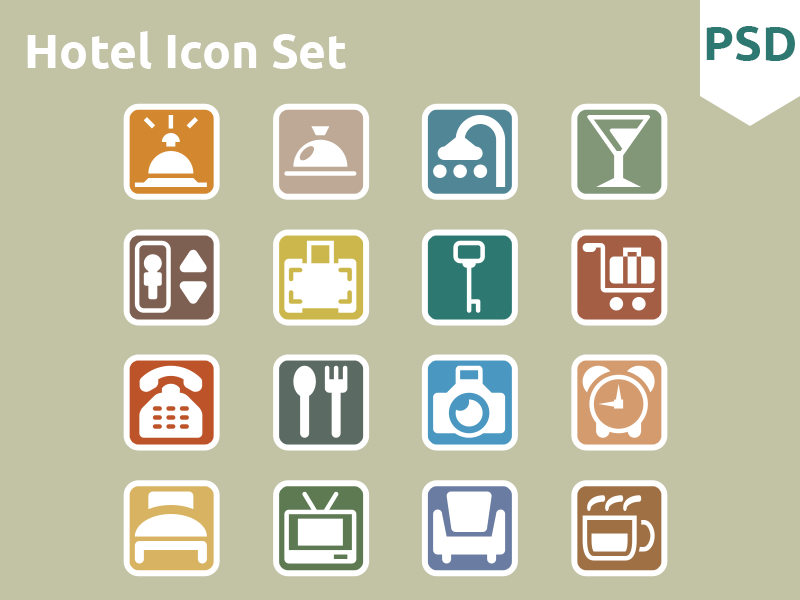
<style>
.page{position:relative;width:800px;height:600px;background:#c2c2a5}
.page>*{position:absolute;margin:0}
.t1{font:48px "Ubuntu-Bold";color:#2d7871}
.t2{font:48px "Ubuntu-Bold";color:#ffffff}
</style>
<div class="page">
<p class="t1" style="left:706px;top:26px;width:89px;height:35px">PSD</p>
<p class="t2" style="left:27px;top:31px;width:319px;height:38px">Hotel Icon Set</p>
</div>
